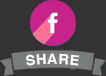
<style>
.page{position:relative;width:106px;height:76px;background:#333333}
.page>*{position:absolute;margin:0}
.t1{font:13.9px "Helvetica-Bold";letter-spacing:0.04em;color:#ffffff}
</style>
<div class="page">
<p class="t1" style="left:26px;top:53px;width:54px;height:13px">SHARE</p>
</div>
